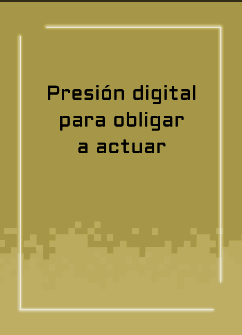
<style>
.page{position:relative;width:242px;height:335px;background:#a69647}
.page>*{position:absolute;margin:0}
.t1{font:20px/26.7px "Aldrich-Regular";letter-spacing:0.015em;color:#000000}
</style>
<div class="page">
<p class="t1" style="left:48px;top:85px;width:148px;height:69px;text-align:center">Presión digital<br>para obligar<br>a actuar</p>
</div>
